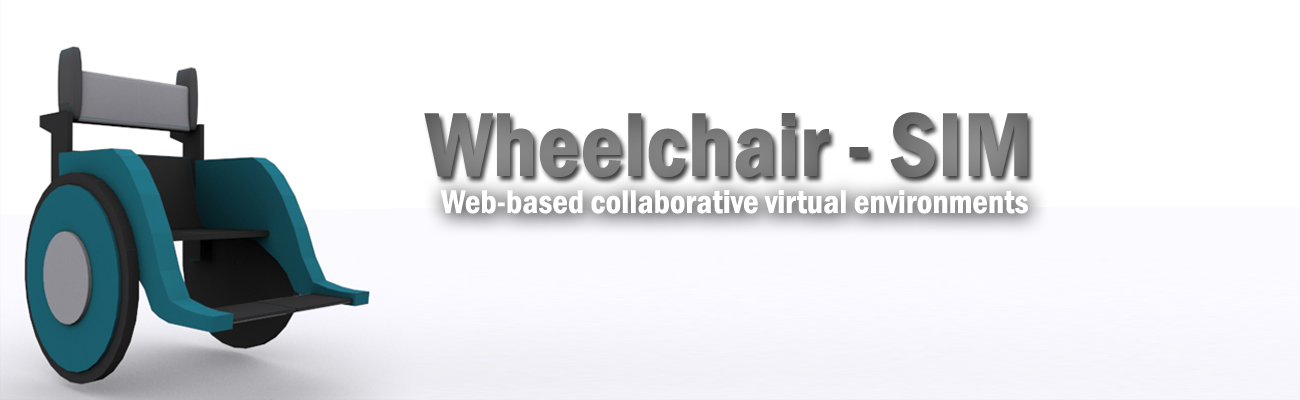
<style>
.page{position:relative;width:1300px;height:400px;background:#ffffff}
.page>*{position:absolute;margin:0}
.t1{font:94px "FranklinGothic-DemiCond";color:#7c7c7c}
.t2{font:34px "FranklinGothic-DemiCond";color:#ffffff}
</style>
<div class="page">
<p class="t1" style="left:424px;top:112px;width:604px;height:65px">Wheelchair - SIM</p>
<p class="t2" style="left:440px;top:190px;width:588px;height:24px">Web-based collaborative virtual environments</p>
</div>
